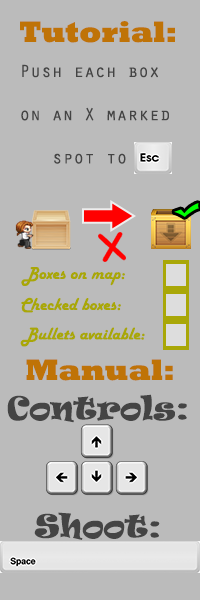
<style>
.page{position:relative;width:200px;height:600px;background:#bbbbbb}
.page>*{position:absolute;margin:0}
.t1{font:30px "Rockwell-ExtraBold";color:#bf7307}
.t2{font:18px "OratorStd";color:#444444}
.t3{font:18px "HarlowSolid";color:#a9a707}
.t4{font:30px "Ravie";color:#444444}
</style>
<div class="page">
<p class="t1" style="left:20px;top:21px;width:155px;height:22px">Tutorial:</p>
<p class="t2" style="left:21px;top:64px;width:148px;height:100px;text-align:center">Push each box <br><br>on an X marked<br><br>spot to</p>
<p class="t3" style="left:21px;top:267px;width:104px;height:19px">Boxes on map:</p>
<p class="t3" style="left:21px;top:297px;width:100px;height:16px">Checked boxes:</p>
<p class="t3" style="left:20px;top:327px;width:125px;height:20px">Bullets available:</p>
<p class="t1" style="left:26px;top:359px;width:147px;height:22px">Manual:</p>
<p class="t4" style="left:7px;top:394px;width:180px;height:29px">Controls:</p>
<p class="t4" style="left:34px;top:512px;width:126px;height:28px">Shoot:</p>
</div>
